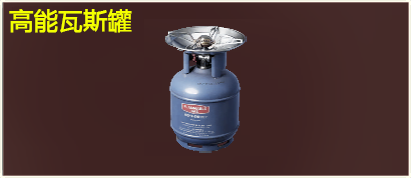
<style>
.page{position:relative;width:411px;height:178px}
.page>*{position:absolute;margin:0}
.t1{font:24px "MicrosoftYaHeiUI";color:#f4ff00;font-weight:bold}
</style>
<div class="page">
<p class="t1" style="left:9px;top:9px;width:123px;height:24px">高能瓦斯罐</p>
</div>
